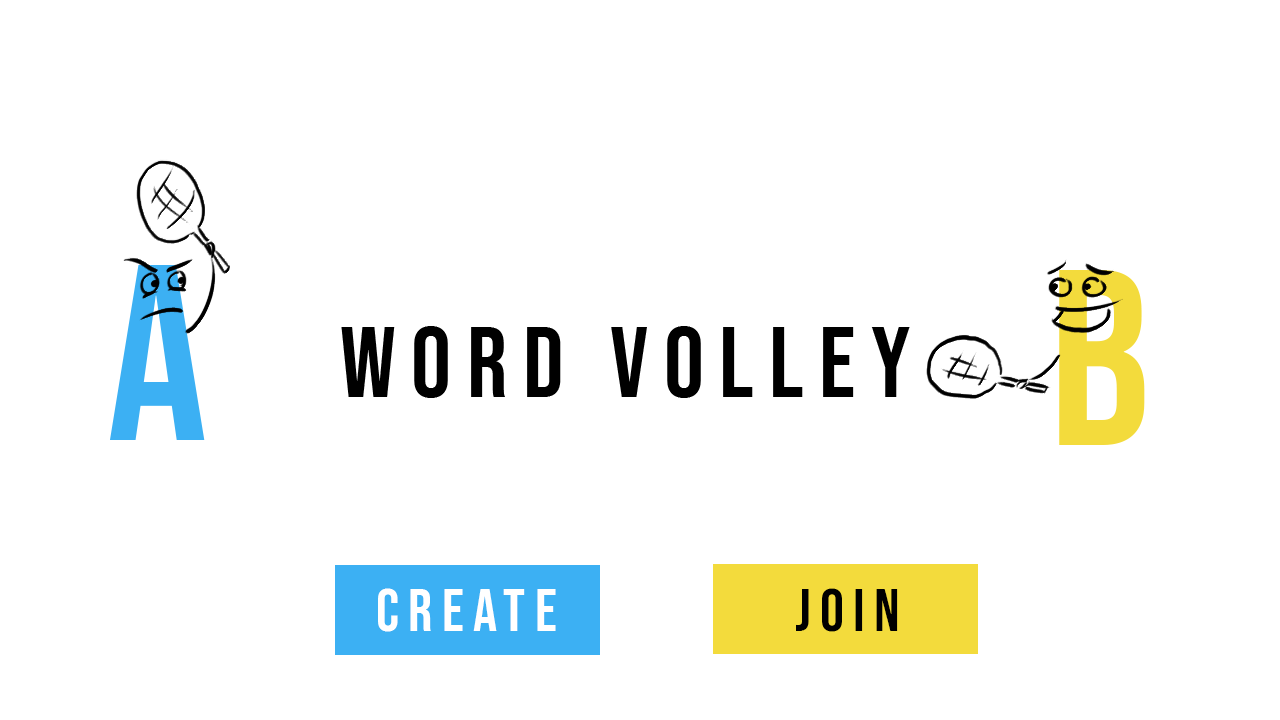
<style>
.page{position:relative;width:1280px;height:720px;background:#ffffff}
.page>*{position:absolute;margin:0}
.t1{font:250px "BebasNeue-Regular";letter-spacing:0.155em;color:#3cb0f3}
.t2{font:250px "BebasNeue-Regular";letter-spacing:0.155em;color:#f3db3c}
.t3{font:100px "BebasNeue-Regular";letter-spacing:0.155em;color:#000000}
.t4{font:60px "BebasNeue-Regular";letter-spacing:0.155em;color:#ffffff}
.t5{font:60px "BebasNeue-Regular";letter-spacing:0.155em;color:#000000}
</style>
<div class="page">
<p class="t1" style="left:110px;top:265px;width:95px;height:175px">A</p>
<p class="t2" style="left:1059px;top:270px;width:86px;height:175px">B</p>
<p class="t3" style="left:341px;top:326px;width:569px;height:72px">word volley</p>
<p class="t4" style="left:378px;top:588px;width:178px;height:44px">CREATE</p>
<p class="t5" style="left:796px;top:588px;width:102px;height:44px">JOIN</p>
</div>
